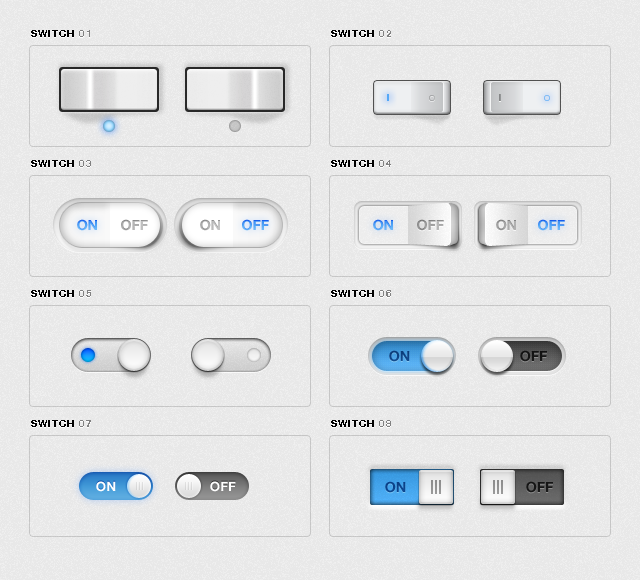
<style>
.page{position:relative;width:640px;height:580px;background:#e8e8e8}
.page>*{position:absolute;margin:0}
.t1{font:10px "HelveticaNeue-Bold";letter-spacing:0.1em;color:#000000;text-transform:uppercase}
.t2{font:10px "HelveticaNeue-Bold";letter-spacing:0.02em;color:#000000;text-transform:uppercase}
.t3{font:10px "HelveticaNeue-Bold";letter-spacing:0.1em;color:#818181;text-transform:uppercase}
.t4{font:14px "HelveticaNeue-Bold";color:#54a8f7;text-transform:uppercase}
.t5{font:14px "HelveticaNeue-Bold";color:#b0b0b0;text-transform:uppercase}
.t6{font:14px "HelveticaNeue-Bold";color:#bababa;text-transform:uppercase}
.t7{font:14px "HelveticaNeue-Bold";text-transform:uppercase}
.t8{font:14px "HelveticaNeue-Bold";color:#aaaaaa;text-transform:uppercase}
.t9{font:14px "HelveticaNeue-Bold";color:#0e4285;text-transform:uppercase}
.t10{font:14px "HelveticaNeue-Bold";color:#000000;text-transform:uppercase}
.t11{font:13px "HelveticaNeue-Bold";color:#ffffff}
.t12{font:14px "HelveticaNeue-Bold";color:#0b438b;text-transform:uppercase}
</style>
<div class="page">
<p class="t1" style="left:31px;top:30px;width:59px;height:7px"><span class="t2">S</span>witch <span class="t3">01</span></p>
<p class="t1" style="left:331px;top:30px;width:60px;height:7px"><span class="t2">S</span>witch <span class="t3">02</span></p>
<p class="t1" style="left:31px;top:160px;width:60px;height:7px"><span class="t2">S</span>witch <span class="t3">03</span></p>
<p class="t1" style="left:331px;top:160px;width:60px;height:7px"><span class="t2">S</span>witch <span class="t3">04</span></p>
<p class="t4" style="left:77px;top:219px;width:20px;height:12px">ON</p>
<p class="t5" style="left:121px;top:219px;width:27px;height:12px">OFF</p>
<p class="t6" style="left:200px;top:219px;width:20px;height:12px">ON</p>
<p class="t4" style="left:242px;top:219px;width:27px;height:12px">Off</p>
<p class="t4" style="left:373px;top:219px;width:20px;height:12px">ON</p>
<p class="t7" style="left:417px;top:219px;width:27px;height:12px">Off</p>
<p class="t8" style="left:496px;top:219px;width:20px;height:12px">ON</p>
<p class="t4" style="left:538px;top:219px;width:27px;height:12px">Off</p>
<p class="t1" style="left:31px;top:290px;width:60px;height:7px"><span class="t2">S</span>witch <span class="t3">05</span></p>
<p class="t1" style="left:331px;top:290px;width:60px;height:7px"><span class="t2">S</span>witch <span class="t3">06</span></p>
<p class="t9" style="left:389px;top:350px;width:21px;height:12px">ON</p>
<p class="t10" style="left:520px;top:350px;width:27px;height:12px">OFF</p>
<p class="t1" style="left:31px;top:420px;width:60px;height:7px"><span class="t2">S</span>witch <span class="t3">07</span></p>
<p class="t1" style="left:331px;top:420px;width:60px;height:7px"><span class="t2">S</span>witch <span class="t3">08</span></p>
<p class="t11" style="left:96px;top:481px;width:20px;height:11px">ON</p>
<p class="t11" style="left:210px;top:481px;width:26px;height:11px">OFF</p>
<p class="t12" style="left:385px;top:481px;width:21px;height:12px">ON</p>
<p class="t10" style="left:526px;top:481px;width:27px;height:12px">OFF</p>
</div>
